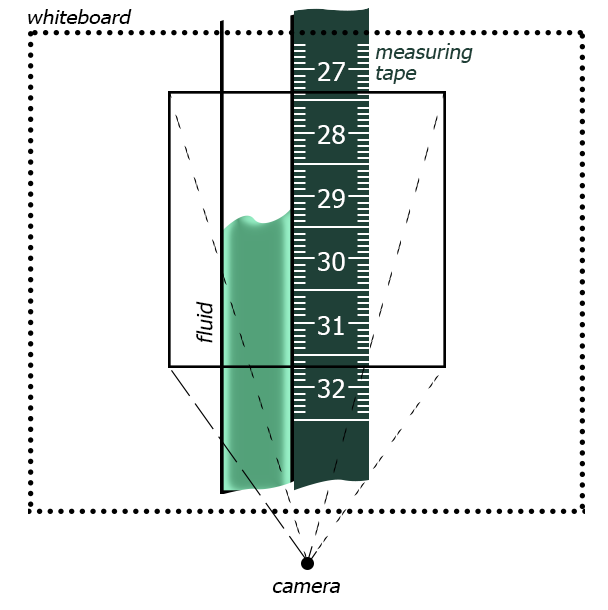
<style>
.page{position:relative;width:608px;height:610px;background:#ffffff}
.page>*{position:absolute;margin:0}
.t1{font:19.4px "Tahoma";color:#000000;font-style:italic;scale:1.09 1}
.t2{font:21.1px/21.2px "Tahoma";color:#1f4037;font-style:italic}
.t3{font:26.5px/31.8px "Tahoma";color:#ffffff}
.t4{font:31.8px/31.8px "Tahoma-Bold";color:#ffffff}
.t5{font:21.1px "Tahoma";color:#000000;font-style:italic}
</style>
<div class="page">
<p class="t1" style="left:28px;top:9px;width:104px;height:15px">whiteboard</p>
<p class="t2" style="left:375px;top:43px;width:98px;height:41px">measuring <br>tape</p>
<p class="t3" style="left:318px;top:62px;width:27px;height:336px;text-align:center"><span class="t4"><br></span>27<br><br>28<br><br>29<br><br>30<br><br>31<br><br>32</p>
<p class="t5" style="left:196px;top:301px;width:17px;height:42px;rotate:-90deg">fluid</p>
<p class="t5" style="left:272px;top:582px;width:68px;height:11px">camera</p>
</div>
